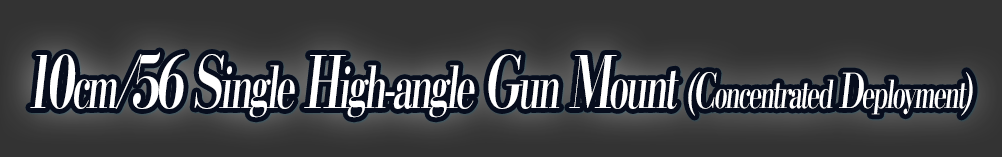
<style>
.page{position:relative;width:1002px;height:157px;background:#333333}
.page>*{position:absolute;margin:0}
.t1{font:38.4px "KochoStd-Heavy";letter-spacing:-0.08em;color:#ffffff;font-style:italic;scale:0.63 1}
.t2{font:72px "KochoStd-Heavy";letter-spacing:-0.08em;color:#ffffff;font-style:italic;scale:0.63 1}
.t3{font:57.6px "KochoStd-Heavy";letter-spacing:-0.08em;color:#ffffff;font-style:italic;scale:0.63 1}
.t4{font:48px "KochoStd-Heavy";letter-spacing:-0.08em;color:#ffffff;font-style:italic;scale:0.63 1}
</style>
<div class="page">
<p class="t1" style="left:30px;top:52px;width:943px;height:66px"><span class="t2">10</span><span class="t3">cm</span><span class="t2">/56 S</span><span class="t3">ingle</span><span class="t2"> H</span><span class="t3">igh-angle</span><span class="t2"> G</span><span class="t3">un</span><span class="t2"> M</span><span class="t3">ount </span><span class="t4">(C</span>oncentrated<span class="t4"> D</span>eployment<span class="t4">)</span></p>
</div>
